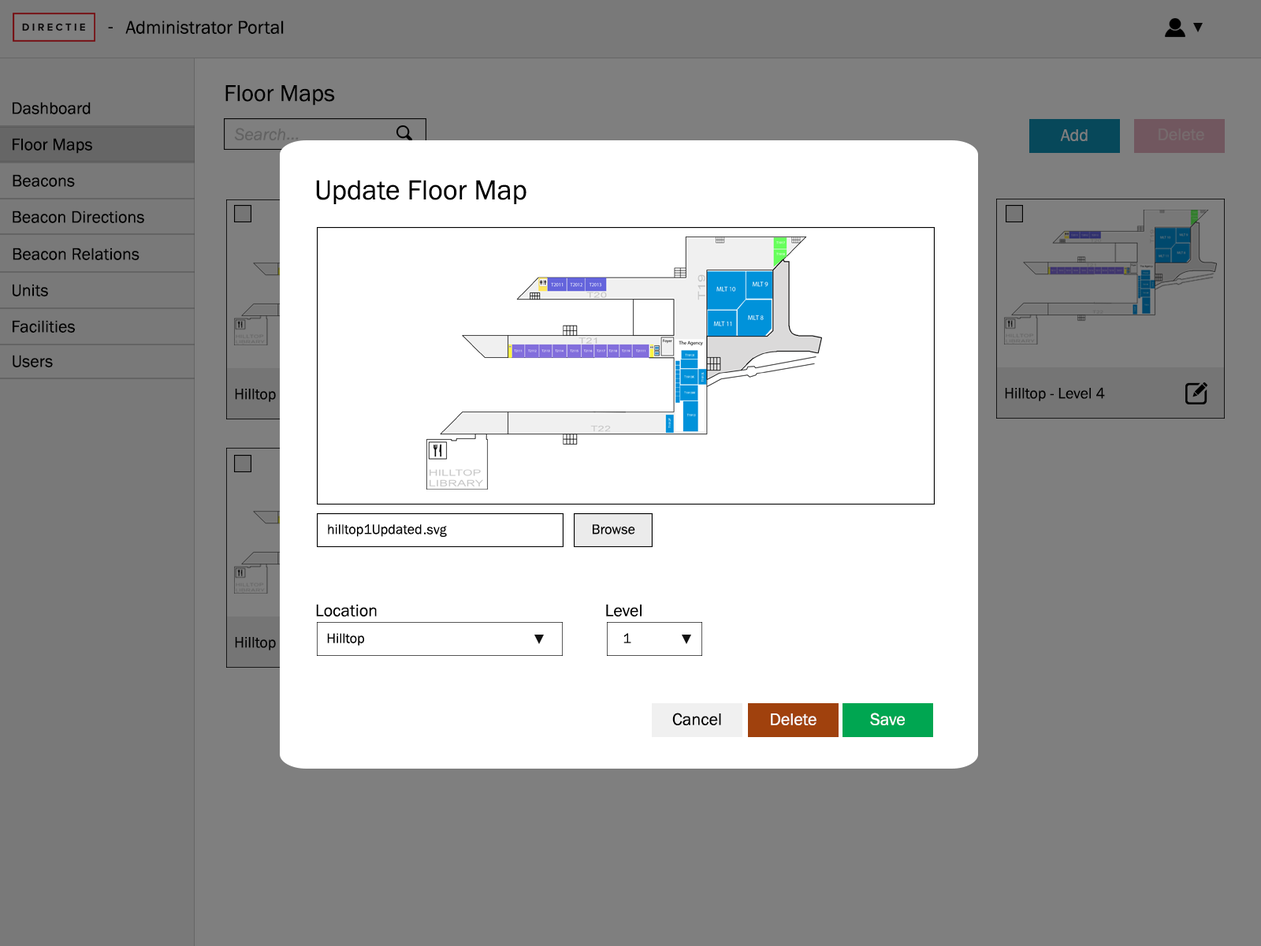
<style>
.page{position:relative;width:1261px;height:946px;background:#7f7f7f}
.page>*{position:absolute;margin:0}
.t1{font:18.9px "FranklinGothic-Book";color:#000000}
.t2{font:23.6px "FranklinGothic-Book";color:#000000}
.t3{font:17.3px "FranklinGothic-Book";color:#000000}
.t4{font:17.3px "FranklinGothic-Book";color:#7f7f7f}
.t5{font:17.3px "FranklinGothic-Book";color:#766b6d}
.t6{font:28.4px "FranklinGothic-Book";color:#000000}
.t7{font:14.2px "FranklinGothic-Book";color:#000000}
.t8{font:17.3px "FranklinGothic-Book";color:#010101}
.t9{font:17.3px "FranklinGothic-Book";color:#fefefe}
</style>
<div class="page">
<p class="t1" style="left:108px;top:27px;width:5px;height:1px">-</p>
<p class="t1" style="left:125px;top:20px;width:159px;height:14px">Administrator Portal</p>
<p class="t2" style="left:225px;top:85px;width:110px;height:21px">Floor Maps</p>
<p class="t3" style="left:13px;top:102px;width:78px;height:12px">Dashboard</p>
<p class="t3" style="left:13px;top:138px;width:79px;height:16px">Floor Maps</p>
<p class="t4" style="left:1060px;top:129px;width:28px;height:12px">Add</p>
<p class="t5" style="left:1158px;top:128px;width:46px;height:12px">Delete</p>
<p class="t3" style="left:13px;top:174px;width:62px;height:13px">Beacons</p>
<p class="t6" style="left:316px;top:180px;width:210px;height:24px">Update Floor Map</p>
<p class="t3" style="left:13px;top:210px;width:131px;height:13px">Beacon Directions</p>
<p class="t3" style="left:13px;top:247px;width:126px;height:13px">Beacon Relations</p>
<p class="t3" style="left:13px;top:284px;width:35px;height:12px">Units</p>
<p class="t3" style="left:13px;top:320px;width:62px;height:13px">Facilities</p>
<p class="t3" style="left:13px;top:355px;width:40px;height:12px">Users</p>
<p class="t7" style="left:328px;top:524px;width:94px;height:13px">hilltop1Updated</p>
<p class="t7" style="left:424px;top:526px;width:23px;height:11px">svg.</p>
<p class="t7" style="left:593px;top:524px;width:42px;height:10px">Browse</p>
<p class="t3" style="left:316px;top:604px;width:61px;height:12px">Location</p>
<p class="t3" style="left:606px;top:604px;width:35px;height:12px">Level</p>
<p class="t7" style="left:327px;top:633px;width:37px;height:12px">Hilltop</p>
<p class="t7" style="left:623px;top:633px;width:8px;height:10px">1</p>
<p class="t8" style="left:672px;top:712px;width:49px;height:13px">Cancel</p>
<p class="t9" style="left:771px;top:713px;width:45px;height:12px">Delete</p>
<p class="t9" style="left:870px;top:712px;width:35px;height:13px">Save</p>
</div>
